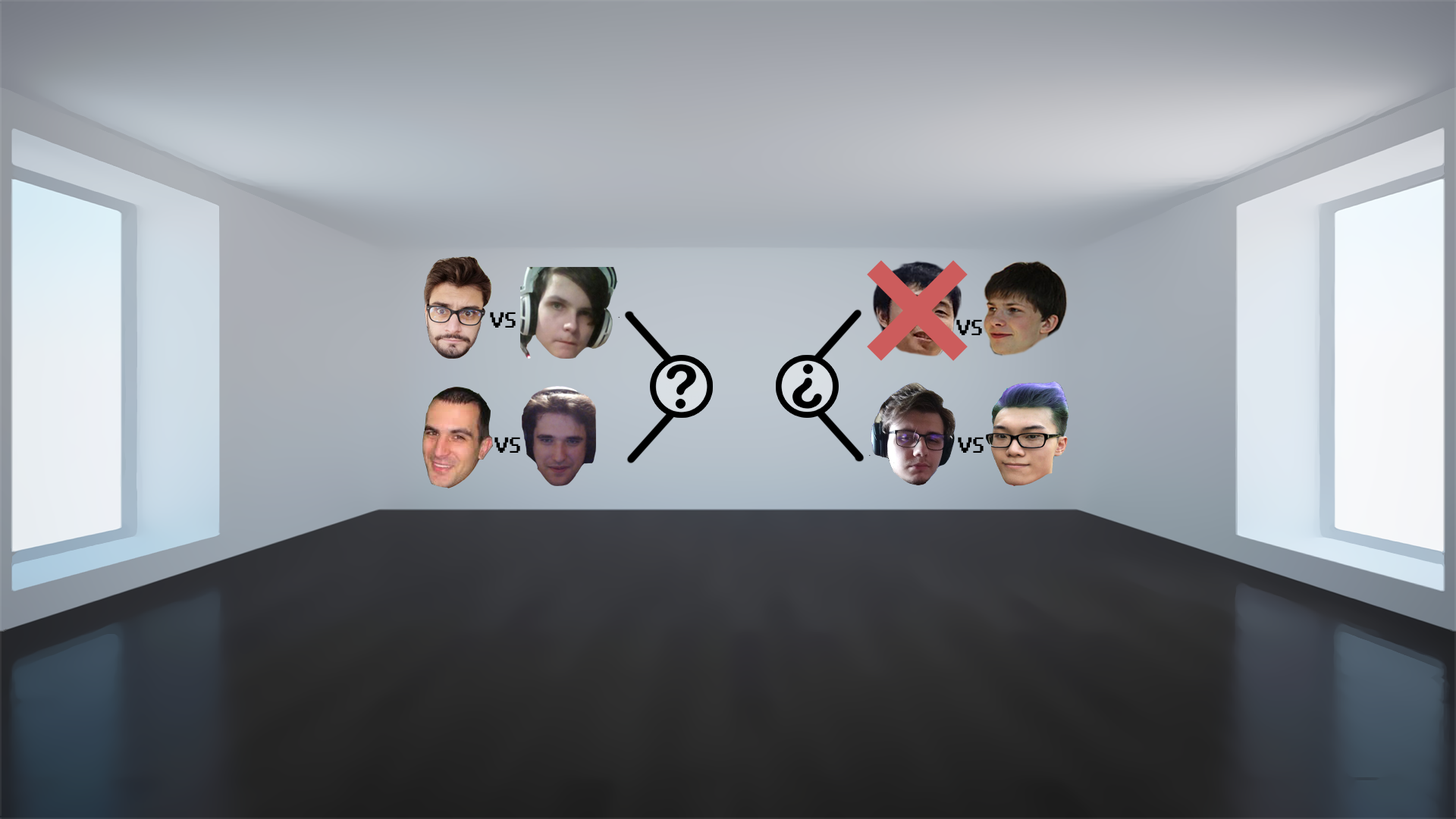
<style>
.page{position:relative;width:1456px;height:819px}
.page>*{position:absolute;margin:0}
.t1{font:54.6px "Game-Over";color:#000000}
</style>
<div class="page">
<p class="t1" style="left:490px;top:312px;width:26px;height:16px">VS</p>
<p class="t1" style="left:956px;top:319px;width:26px;height:16px">VS</p>
<p class="t1" style="left:494px;top:437px;width:26px;height:16px">VS</p>
<p class="t1" style="left:958px;top:437px;width:26px;height:16px">VS</p>
</div>
